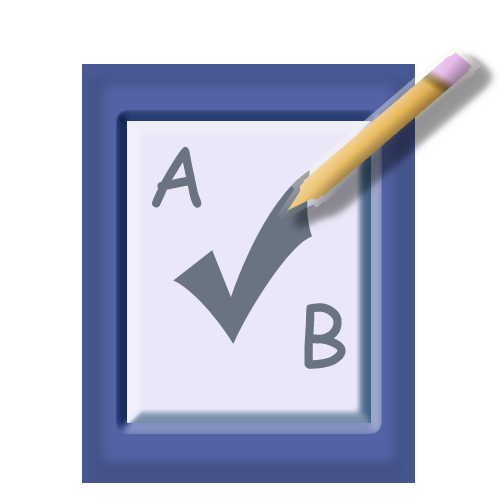
<style>
.page{position:relative;width:500px;height:500px;background:#ffffff}
.page>*{position:absolute;margin:0}
.t1{font:82.4px "ComicSansMS";color:#6a7382}
</style>
<div class="page">
<p class="t1" style="left:152px;top:146px;width:50px;height:62px">A</p>
<p class="t1" style="left:304px;top:303px;width:42px;height:66px">B</p>
</div>
